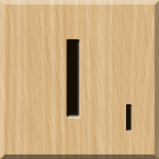
<style>
.page{position:relative;width:159px;height:159px}
.page>*{position:absolute;margin:0}
.t1{font:94px "HGSSoeiKakugothicUB";color:#180e01}
.t2{font:36px "GillSansMT";color:#1c1101;font-weight:bold;scale:1.1 1}
</style>
<div class="page">
<p class="t1" style="left:67px;top:40px;width:13px;height:77px">I</p>
<p class="t2" style="left:126px;top:104px;width:6px;height:27px">1</p>
</div>
